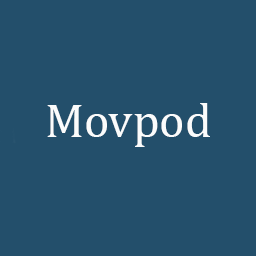
<style>
.page{position:relative;width:256px;height:256px;background:#234f6b}
.page>*{position:absolute;margin:0}
.t1{font:48px "Cambria";color:#fbfcfc}
</style>
<div class="page">
<p class="t1" style="left:47px;top:103px;width:163px;height:44px">Movpod</p>
</div>
